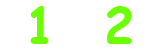
<style>
.page{position:relative;width:160px;height:50px;background:#ffffff}
.page>*{position:absolute;margin:0}
.t1{font:12px "ComicSansMS-Bold";color:#6cff00}
</style>
<div class="page">
<p class="t1" style="left:30px;top:6px;width:19px;height:38px">1</p>
<p class="t1" style="left:107px;top:6px;width:25px;height:38px">2</p>
</div>
